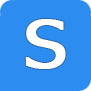
<style>
.page{position:relative;width:91px;height:91px;background:#2d8cf0}
.page>*{position:absolute;margin:0}
.t1{font:64.4px "Tahoma";color:#ffffff;font-weight:bold;scale:1.19 1}
</style>
<div class="page">
<p class="t1" style="left:25px;top:19px;width:41px;height:50px">S</p>
</div>
